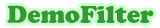
<style>
.page{position:relative;width:160px;height:28px;background:#ffffff}
.page>*{position:absolute;margin:0}
.t1{font:24px "CooperBlackStd";color:#339933}
</style>
<div class="page">
<p class="t1" style="left:7px;top:5px;width:147px;height:18px">DemoFilter</p>
</div>
